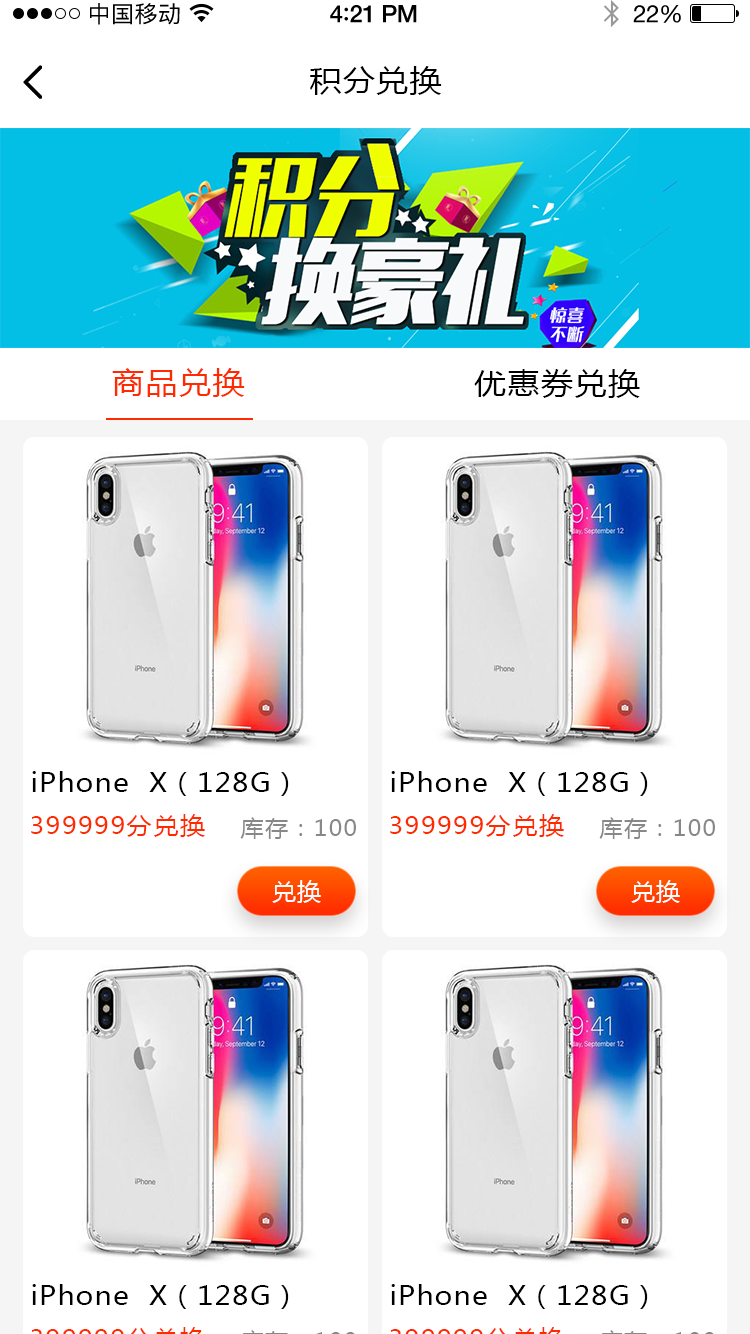
<style>
.page{position:relative;width:750px;height:1334px;background:#ffffff}
.page>*{position:absolute;margin:0}
.t1{font:23px "PingFangSC-Regular";letter-spacing:0.02em;color:#000000}
.t2{font:24px "HelveticaNeue-Medium";letter-spacing:-0.02em;color:#000000}
.t3{font:26px "Avenir-Medium";letter-spacing:-0.02em;color:#000000}
.t4{font:24px "HelveticaNeue";letter-spacing:-0.02em;color:#000000}
.t5{font:30px "MicrosoftYaHei";letter-spacing:0.05em;color:#000000;scale:1.06 1}
.t6{font:30px "MicrosoftYaHei";letter-spacing:0.05em;color:#ff2a00;scale:1.06 1}
.t7{font:26px "MicrosoftYaHei";letter-spacing:0.05em;color:#000000;scale:1.06 1}
.t8{font:24px "MicrosoftYaHei";letter-spacing:0.05em;color:#ff2a00;scale:1.06 1}
.t9{font:22px "MicrosoftYaHei";letter-spacing:0.05em;color:#888888;scale:1.06 1}
.t10{font:24px "MicrosoftYaHei";letter-spacing:0.05em;color:#ffffff;text-transform:uppercase}
</style>
<div class="page">
<p class="t1" style="left:90px;top:3px;width:90px;height:22px">中国移动</p>
<p class="t2" style="left:330px;top:5px;width:87px;height:18px">4<span class="t3">:</span>21 PM</p>
<p class="t4" style="left:633px;top:5px;width:48px;height:18px">22%</p>
<p class="t5" style="left:310px;top:66px;width:132px;height:29px">积分兑换</p>
<p class="t6" style="left:112px;top:368px;width:133px;height:29px">商品兑换</p>
<p class="t5" style="left:474px;top:369px;width:166px;height:29px">优惠券兑换</p>
<p class="t7" style="left:32px;top:771px;width:257px;height:25px">iPhone  X（128G）</p>
<p class="t7" style="left:391px;top:771px;width:257px;height:25px">iPhone  X（128G）</p>
<p class="t8" style="left:31px;top:814px;width:174px;height:23px">399999分兑换</p>
<p class="t9" style="left:240px;top:817px;width:116px;height:22px">库存：100</p>
<p class="t8" style="left:390px;top:814px;width:174px;height:23px">399999分兑换</p>
<p class="t9" style="left:599px;top:817px;width:116px;height:22px">库存：100</p>
<p class="t10" style="left:272px;top:880px;width:49px;height:23px">兑换</p>
<p class="t10" style="left:631px;top:880px;width:49px;height:23px">兑换</p>
<p class="t7" style="left:32px;top:1284px;width:257px;height:25px">iPhone  X（128G）</p>
<p class="t7" style="left:391px;top:1284px;width:257px;height:25px">iPhone  X（128G）</p>
</div>
